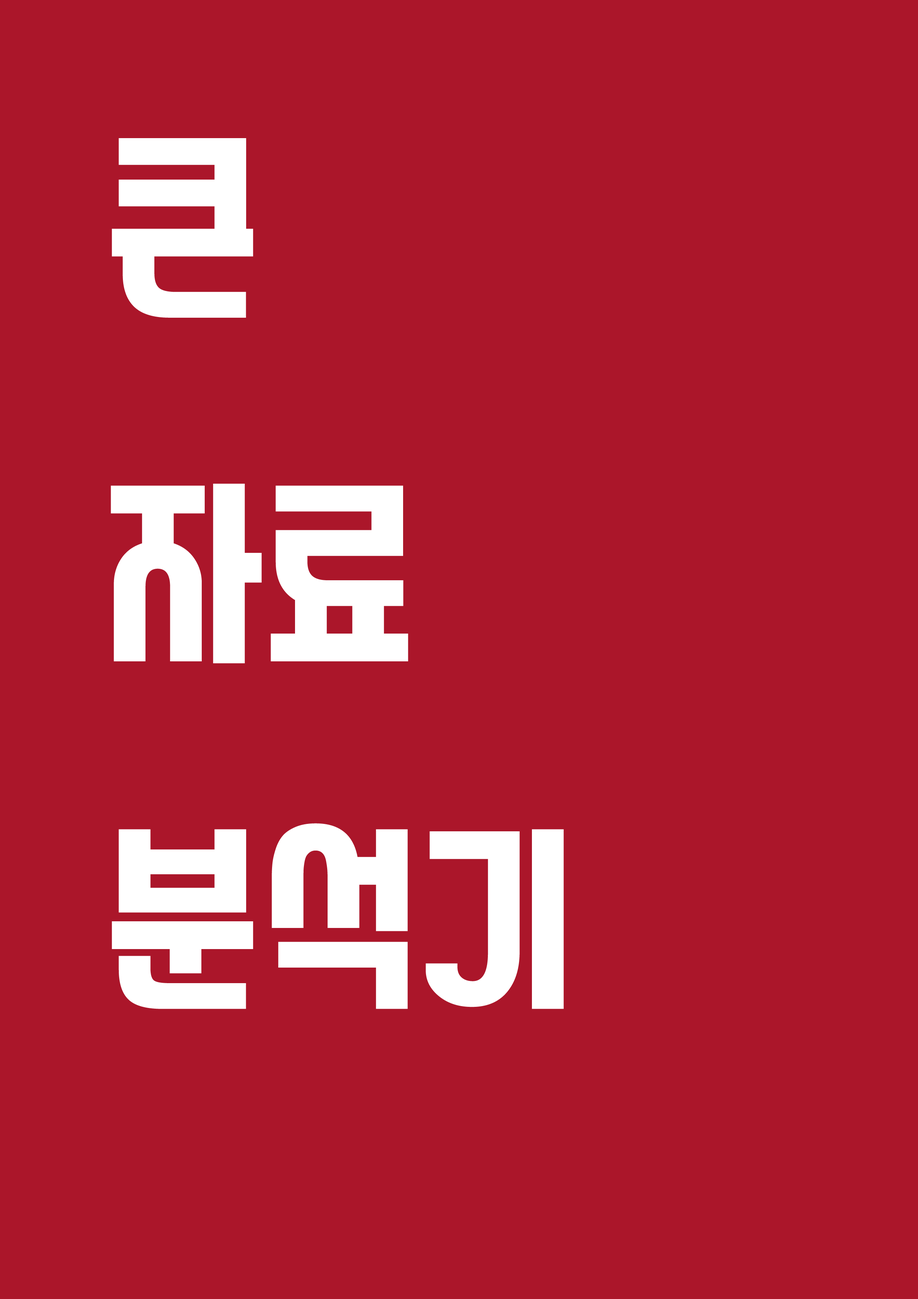
<style>
.page{position:relative;width:918px;height:1299px;background:#ab162a}
.page>*{position:absolute;margin:0}
.t1{font:197.5px "KoreanUJSN-R";letter-spacing:0.005em;color:#ffffff}
</style>
<div class="page">
<p class="t1" style="left:111px;top:138px;width:453px;height:871px">큰<br>자료<br>분석기</p>
</div>
